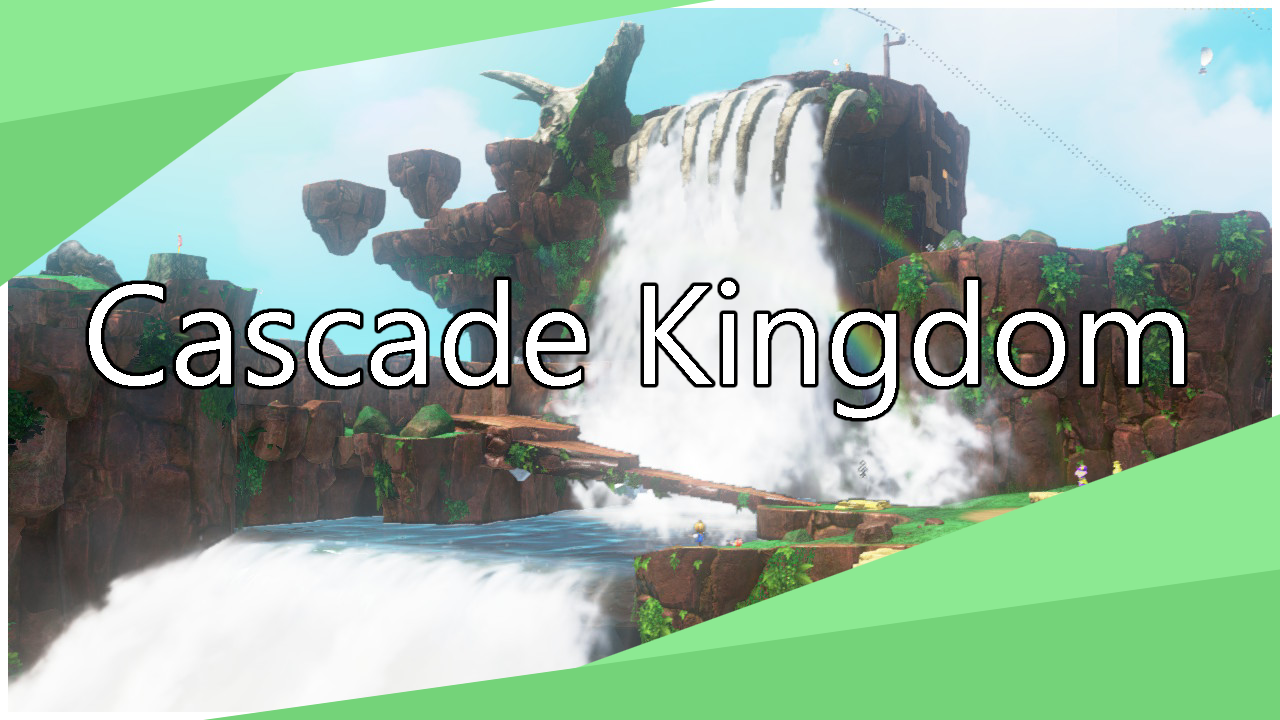
<style>
.page{position:relative;width:1280px;height:720px}
.page>*{position:absolute;margin:0}
.t1{font:140px "SegoeUI";color:#ffffff}
</style>
<div class="page">
<p class="t1" style="left:89px;top:280px;width:1095px;height:138px">Cascade Kingdom</p>
</div>
